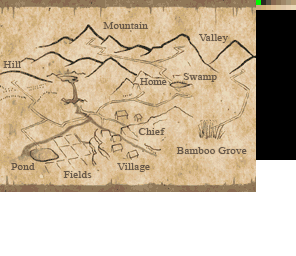
<style>
.page{position:relative;width:296px;height:256px;background:#ffffff}
.page>*{position:absolute;margin:0}
.t1{font:10.2px "TimesNewRomanPSMT";letter-spacing:0.005em;color:#584b40;scale:1.11 1}
.t2{font:10.2px "TimesNewRomanPSMT";letter-spacing:-0.01em;color:#584b40;scale:1.09 1}
.t3{font:10.2px "TimesNewRomanPSMT";color:#584b40;scale:1.11 1}
</style>
<div class="page">
<p class="t1" style="left:103px;top:22px;width:45px;height:7px">Mountain</p>
<p class="t1" style="left:199px;top:34px;width:29px;height:9px">Valley</p>
<p class="t1" style="left:3px;top:61px;width:18px;height:7px">Hill</p>
<p class="t2" style="left:140px;top:78px;width:27px;height:7px">Home</p>
<p class="t3" style="left:183px;top:73px;width:34px;height:9px">Swamp</p>
<p class="t1" style="left:138px;top:128px;width:28px;height:7px">Chief</p>
<p class="t1" style="left:176px;top:147px;width:71px;height:7px">Bamboo Grove</p>
<p class="t1" style="left:11px;top:163px;width:24px;height:7px">Pond</p>
<p class="t1" style="left:63px;top:171px;width:29px;height:7px">Fields</p>
<p class="t1" style="left:117px;top:163px;width:33px;height:9px">Village</p>
</div>
